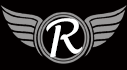
<style>
.page{position:relative;width:127px;height:70px;background:#030000}
.page>*{position:absolute;margin:0}
.t1{font:48px "LucidaHandwriting-Italic";color:#ffffff}
</style>
<div class="page">
<p class="t1" style="left:46px;top:18px;width:36px;height:40px">R</p>
</div>
